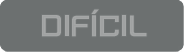
<style>
.page{position:relative;width:184px;height:52px;background:#6c7070}
.page>*{position:absolute;margin:0}
.t1{font:24px "KafuTechnoStd-HV";letter-spacing:0.024em;color:#a0a2a2}
</style>
<div class="page">
<p class="t1" style="left:42px;top:9px;width:105px;height:28px">DIFÍCIL</p>
</div>
